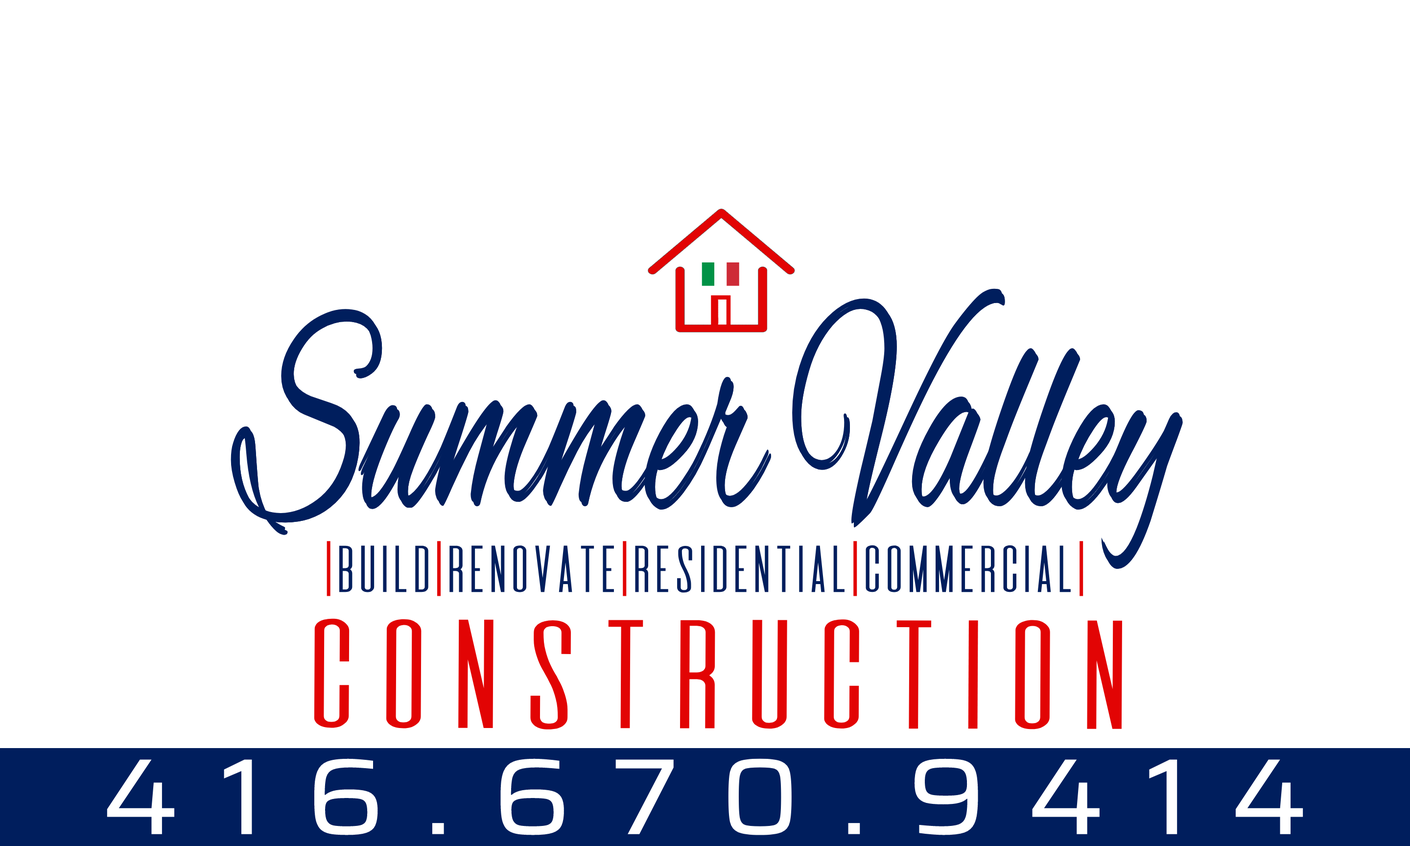
<style>
.page{position:relative;width:1410px;height:846px;background:#ffffff}
.page>*{position:absolute;margin:0}
.t1{font:308.1px "AlexBrush-Regular";color:#001e5d;scale:0.55 1}
.t2{font:57.8px "DeValencia-Regular";letter-spacing:-0.267em;color:#001e5d;scale:1.19 1}
.t3{font:57.8px "DeValencia-Regular";letter-spacing:-0.267em;color:#e20404;scale:1.19 1}
.t4{font:135.1px "DeValencia-Regular";letter-spacing:-0.195em;color:#e20404;scale:1.36 1}
.t5{font:108.2px "Saira-Regular";letter-spacing:0.324em;color:#ffffff;scale:1.13 1}
</style>
<div class="page">
<p class="t1" style="left:231px;top:288px;width:949px;height:277px">Summer Valley</p>
<p class="t1" style="left:233px;top:292px;width:950px;height:277px">Summer Valley</p>
<p class="t1" style="left:233px;top:292px;width:950px;height:277px">Summer Valley</p>
<p class="t2" style="left:326px;top:541px;width:757px;height:55px"><span class="t3">|</span>Build<span class="t3">|</span>Renovate<span class="t3">|</span>resiDENTIAL<span class="t3">|</span>COMMERCIAL<span class="t3">|</span></p>
<p class="t4" style="left:314px;top:618px;width:808px;height:111px">Construction</p>
<p class="t5" style="left:107px;top:758px;width:1196px;height:77px">416.670.9414</p>
</div>
